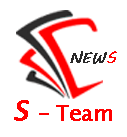
<style>
.page{position:relative;width:127px;height:137px;background:#ffffff}
.page>*{position:absolute;margin:0}
.t1{font:15.2px "MVBoli";color:#2a2929;font-weight:bold}
.t2{font:15.2px "MVBoli";color:#ff0000;font-weight:bold}
.t3{font:20.9px "LucidaSansUnicode";color:#ff0000;font-weight:bold}
.t4{font:26.6px "LucidaSansUnicode";color:#ff0000;font-weight:bold;font-style:italic}
.t5{font:20.9px "LucidaSansUnicode";color:#ff0000;font-weight:bold;font-style:italic}
</style>
<div class="page">
<p class="t1" style="left:70px;top:51px;width:47px;height:13px">NEW<span class="t2">S</span></p>
<p class="t3" style="left:14px;top:100px;width:98px;height:21px"><span class="t4">S</span><span class="t5"> - </span>Team</p>
</div>
